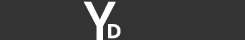
<style>
.page{position:relative;width:245px;height:40px;background:#333333}
.page>*{position:absolute;margin:0}
.t1{font:55px "Poppins-Regular";letter-spacing:-0.01em;color:#ffffff;font-weight:bold}
.t2{font:20px "Poppins-SemiBold";letter-spacing:-0.01em;color:#ffffff;font-weight:bold}
</style>
<div class="page">
<p class="t1" style="left:84px;top:1px;width:32px;height:40px">Y</p>
<p class="t2" style="left:108px;top:24px;width:13px;height:15px">D</p>
</div>
